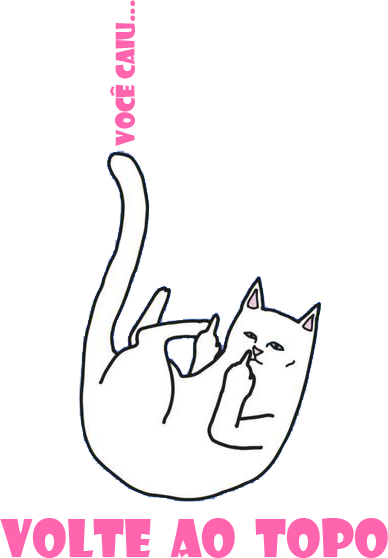
<style>
.page{position:relative;width:388px;height:558px;background:#ffffff}
.page>*{position:absolute;margin:0}
.t1{font:25px "ShowcardGothic-Reg";letter-spacing:-0.005em;color:#ff64ae}
.t2{font:50px "ShowcardGothic-Reg";letter-spacing:-0.005em;color:#ff64ae}
</style>
<div class="page">
<p class="t1" style="left:109px;top:0px;width:26px;height:146px;rotate:-90deg">você caiu...</p>
<p class="t2" style="left:0px;top:518px;width:388px;height:40px">volte  ao  topo</p>
</div>
